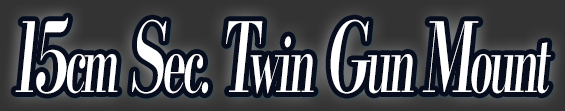
<style>
.page{position:relative;width:565px;height:111px;background:#070d1d}
.page>*{position:absolute;margin:0}
.t1{font:76.8px "KochoStd-Heavy";letter-spacing:-0.08em;color:#ffffff;font-style:italic;scale:0.56 1}
.t2{font:96px "KochoStd-Heavy";letter-spacing:-0.08em;color:#ffffff;font-style:italic;scale:0.56 1}
</style>
<div class="page">
<p class="t1" style="left:15px;top:17px;width:536px;height:77px"><span class="t2">15</span>cm<span class="t2"> S</span>ec.<span class="t2"> T</span>win<span class="t2"> G</span>un <span class="t2">M</span>ount</p>
</div>
